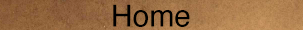
<style>
.page{position:relative;width:303px;height:30px}
.page>*{position:absolute;margin:0}
.t1{font:30px "Helvetica";color:#000000}
</style>
<div class="page">
<p class="t1" style="left:113px;top:4px;width:77px;height:23px">Home</p>
</div>
